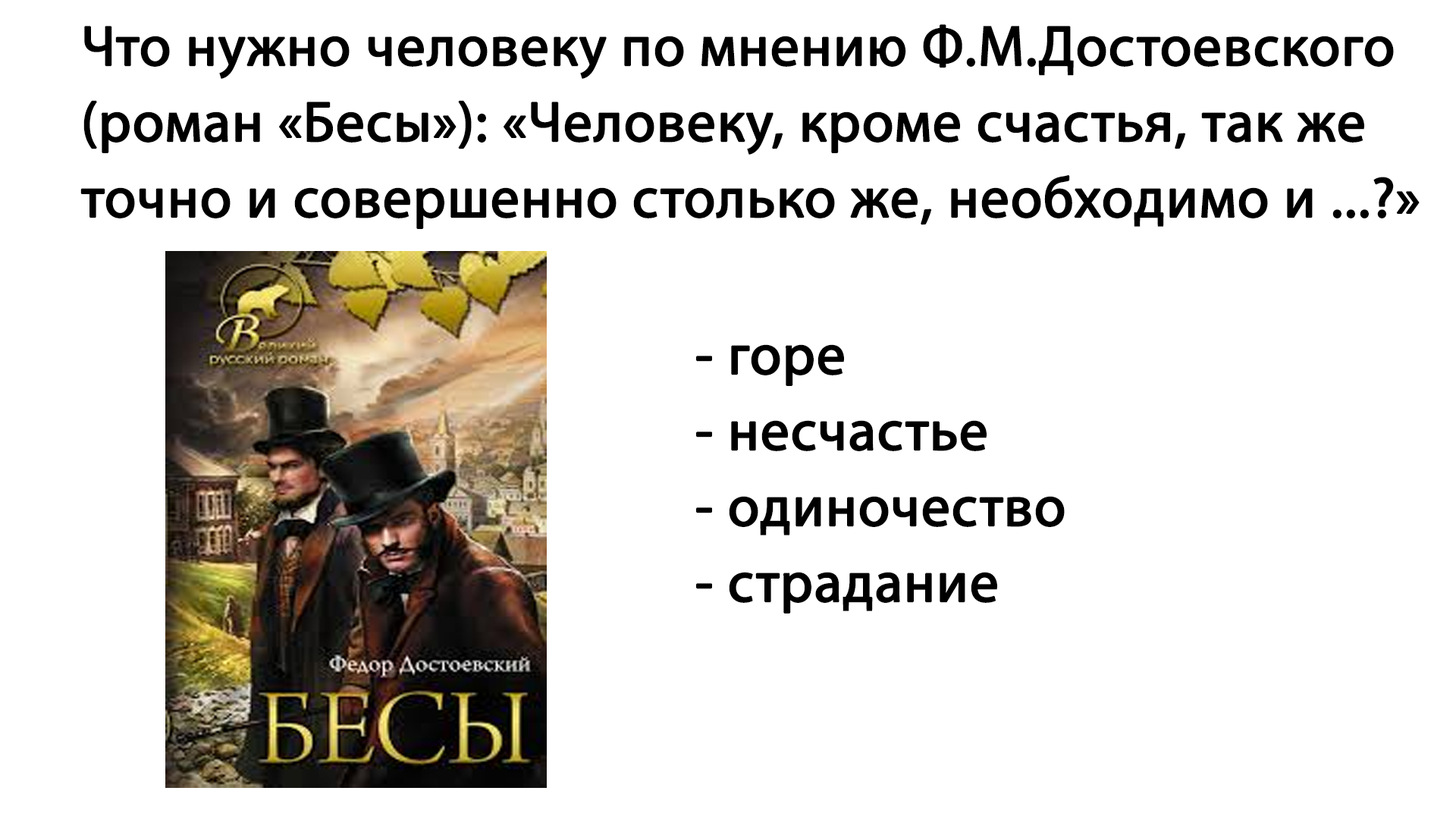
<style>
.page{position:relative;width:1456px;height:819px;background:#ffffff}
.page>*{position:absolute;margin:0}
.t1{font:56.9px/75.8px "MyriadPro-Regular";color:#000000;font-weight:bold}
</style>
<div class="page">
<p class="t1" style="left:80px;top:24px;width:1340px;height:205px">Что нужно человеку по мнению Ф.М.Достоевского<br>(роман «Бесы»): «Человеку, кроме счастья, так же <br>точно и совершенно столько же, необходимо и ...?»</p>
<p class="t1" style="left:696px;top:344px;width:369px;height:269px">- горе<br>- несчастье<br>- одиночество<br>- страдание</p>
</div>
